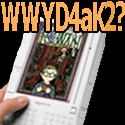
<style>
.page{position:relative;width:125px;height:125px;background:#000000}
.page>*{position:absolute;margin:0}
.t1{font:39.7px "Verdana-Bold";letter-spacing:-0.1em;color:#fbaf5d;scale:0.49 1}
.t2{font:39.7px "Verdana-Bold";letter-spacing:-0.1em;color:#efa14a;scale:0.49 1}
</style>
<div class="page">
<p class="t1" style="left:1px;top:1px;width:125px;height:30px">WWYD4aK<span class="t2">2</span>?</p>
</div>
